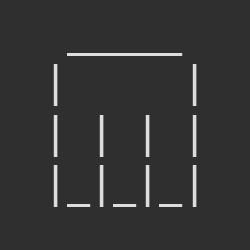
<style>
.page{position:relative;width:250px;height:250px;background:#2f2f2f}
.page>*{position:absolute;margin:0}
.t1{font:42px "Consolas";color:#dddddd}
</style>
<div class="page">
<p class="t1" style="left:53px;top:53px;width:144px;height:154px">_____ <br>|     |<br>| | | |<br>|_|_|_|</p>
</div>
